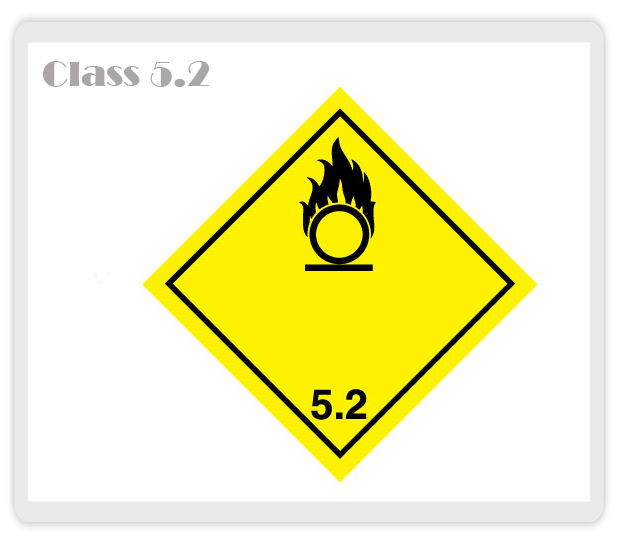
<style>
.page{position:relative;width:618px;height:544px;background:#ffffff}
.page>*{position:absolute;margin:0}
.t1{font:36px "Broadway";color:#aca7a7}
</style>
<div class="page">
<p class="t1" style="left:43px;top:61px;width:167px;height:26px">Class 5.2</p>
</div>
